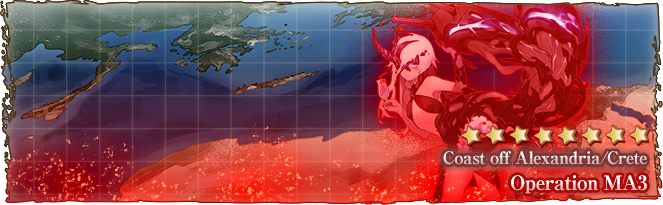
<style>
.page{position:relative;width:663px;height:205px}
.page>*{position:absolute;margin:0}
.t1{font:17px "RyuminPro-ExBold";letter-spacing:-0.04em}
.t2{font:20px "RyuminPro-ExBold";letter-spacing:-0.04em}
</style>
<div class="page">
<p class="t1" style="left:443px;top:151px;width:204px;height:14px">Coast off Alexandria/Crete</p>
<p class="t2" style="left:511px;top:175px;width:136px;height:19px">Operation MA3</p>
</div>
